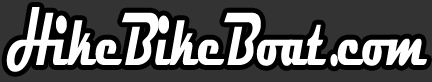
<style>
.page{position:relative;width:432px;height:82px;background:#333333}
.page>*{position:absolute;margin:0}
.t1{font:76px "Magneto-Bold";color:#ffffff;scale:0.54 1}
</style>
<div class="page">
<p class="t1" style="left:6px;top:7px;width:421px;height:65px">HikeBikeBoat.com</p>
</div>
